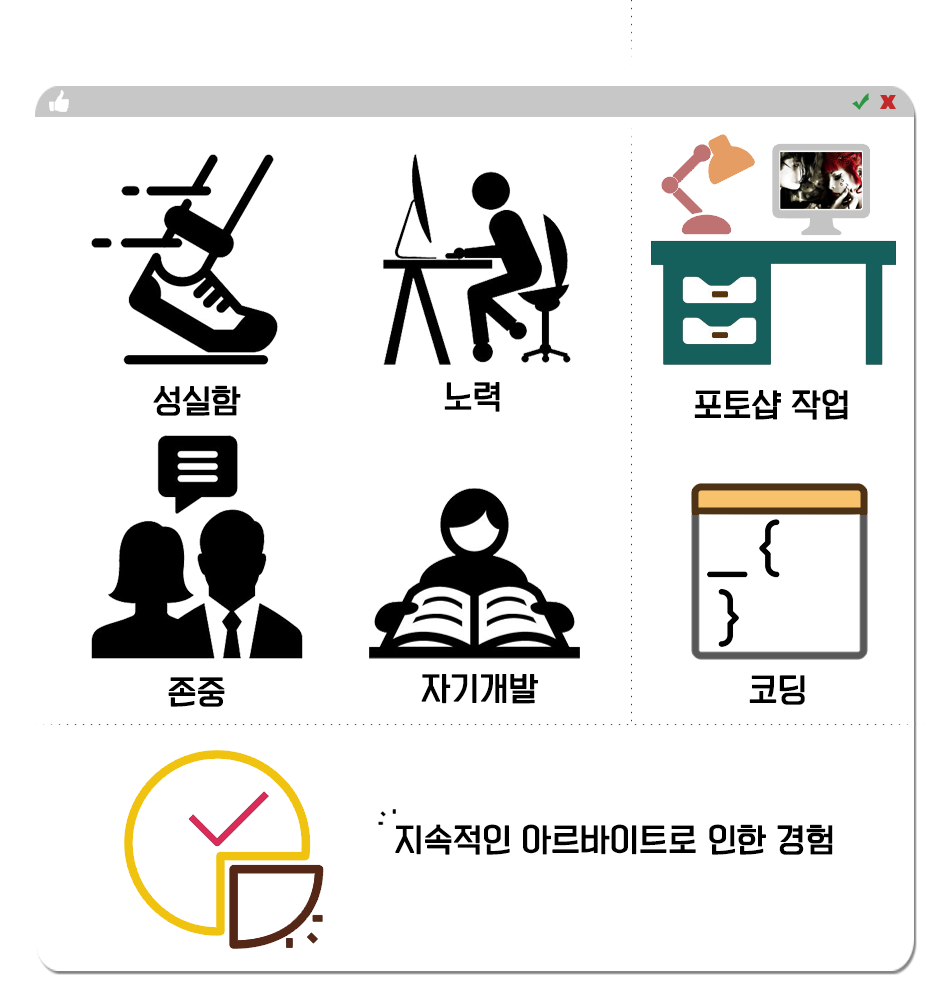
<style>
.page{position:relative;width:950px;height:1000px;background:#ffffff}
.page>*{position:absolute;margin:0}
.t1{font:30px "KoreanYNSJG3-R";color:#000000;font-weight:bold}
</style>
<div class="page">
<p class="t1" style="left:153px;top:385px;width:88px;height:31px">성실함</p>
<p class="t1" style="left:444px;top:382px;width:56px;height:30px">노력</p>
<p class="t1" style="left:694px;top:389px;width:154px;height:31px">포토샵 작업</p>
<p class="t1" style="left:168px;top:677px;width:57px;height:30px">존중</p>
<p class="t1" style="left:421px;top:674px;width:117px;height:30px">자기개발</p>
<p class="t1" style="left:749px;top:675px;width:56px;height:30px">코딩</p>
<p class="t1" style="left:395px;top:824px;width:438px;height:31px">지속적인 아르바이트로 인한 경험</p>
</div>
